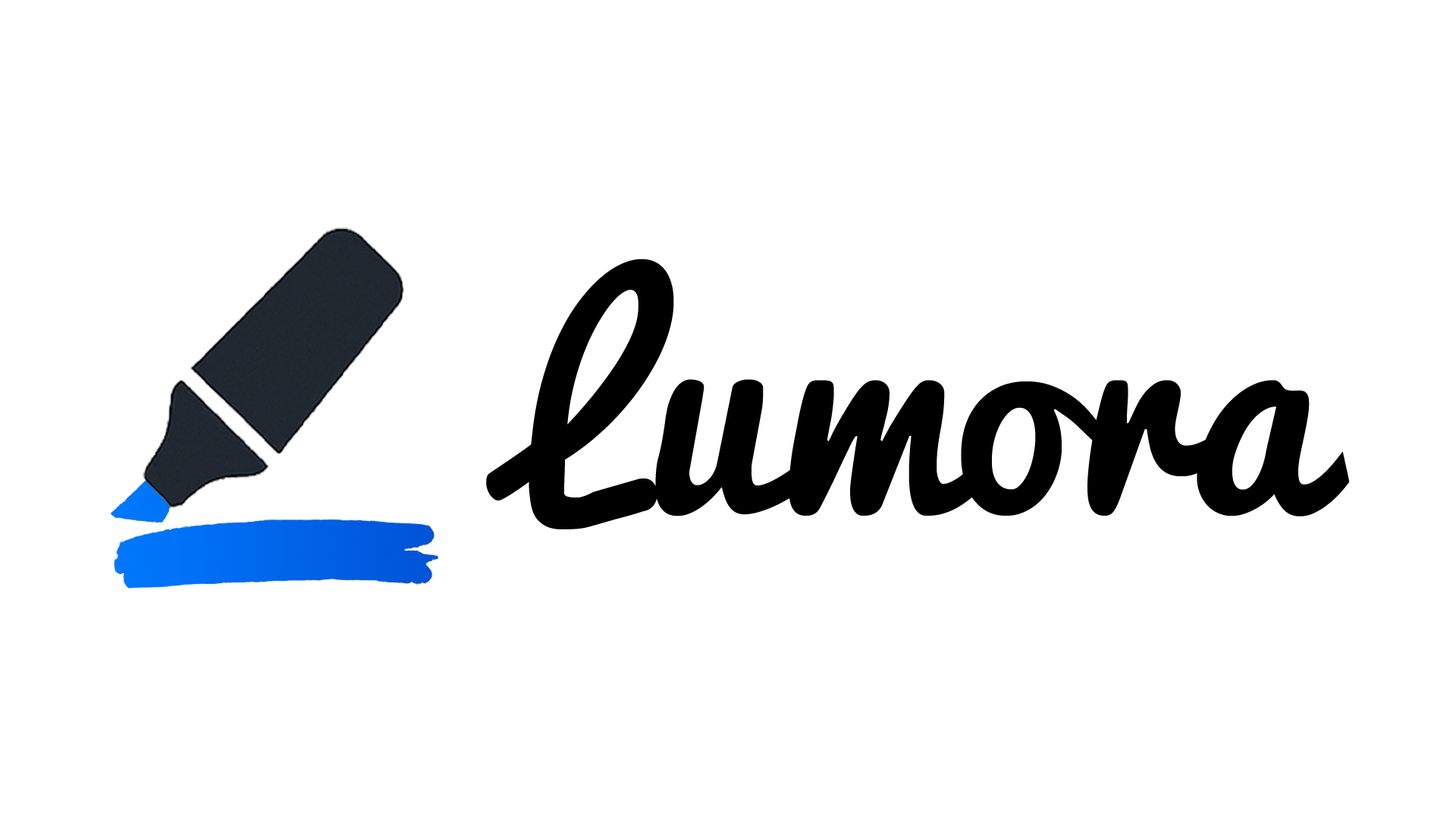
<style>
.page{position:relative;width:1456px;height:819px;background:#ffffff}
.page>*{position:absolute;margin:0}
.t1{font:279.8px "Pacifico";color:#000000}
</style>
<div class="page">
<p class="t1" style="left:486px;top:259px;width:864px;height:270px">Lumora</p>
</div>
